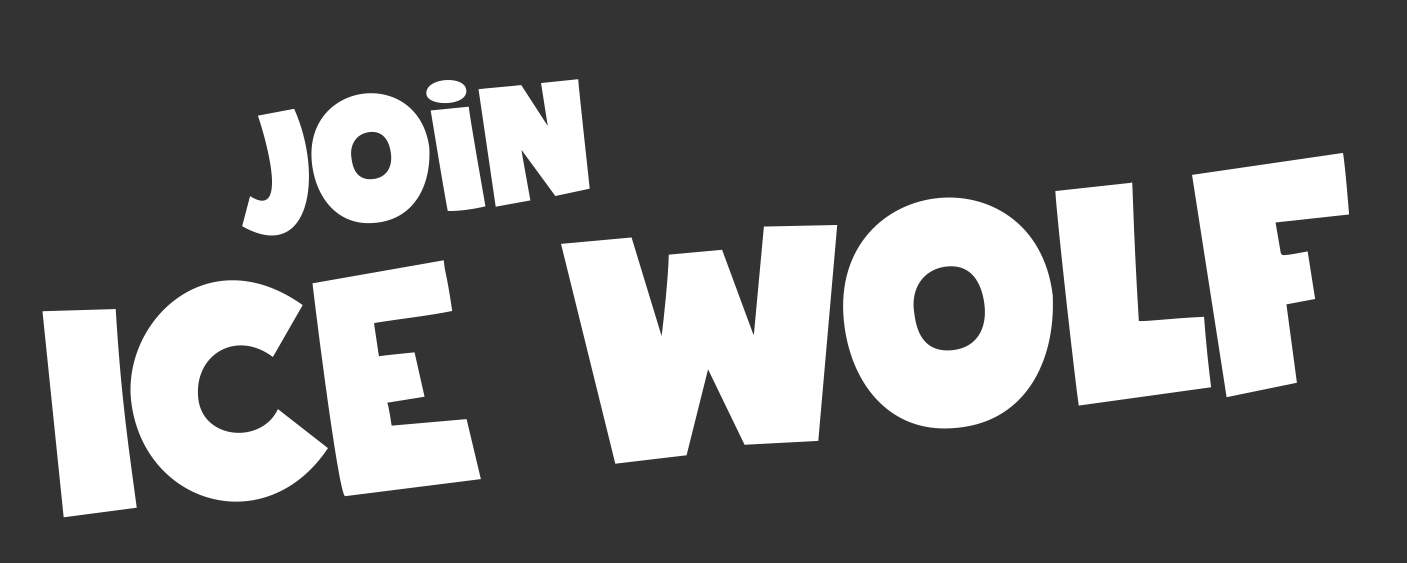
<style>
.page{position:relative;width:1407px;height:563px;background:#333333}
.page>*{position:absolute;margin:0}
.t1{font:180px "DKStickyToffee-Regular";color:#ffffff}
.t2{font:320px "DKStickyToffee-Regular";color:#ffffff}
</style>
<div class="page">
<p class="t1" style="left:242px;top:79px;width:348px;height:157px;rotate:-7deg">Join</p>
<p class="t2" style="left:42px;top:152px;width:1308px;height:366px;rotate:-6deg">Ice Wolf</p>
</div>
